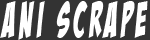
<style>
.page{position:relative;width:150px;height:40px;background:#333333}
.page>*{position:absolute;margin:0}
.t1{font:50.1px "BadaBoomBB";letter-spacing:0.15em;color:#ffffff;scale:0.57 1}
</style>
<div class="page">
<p class="t1" style="left:0px;top:1px;width:148px;height:39px">Ani Scrape</p>
</div>
